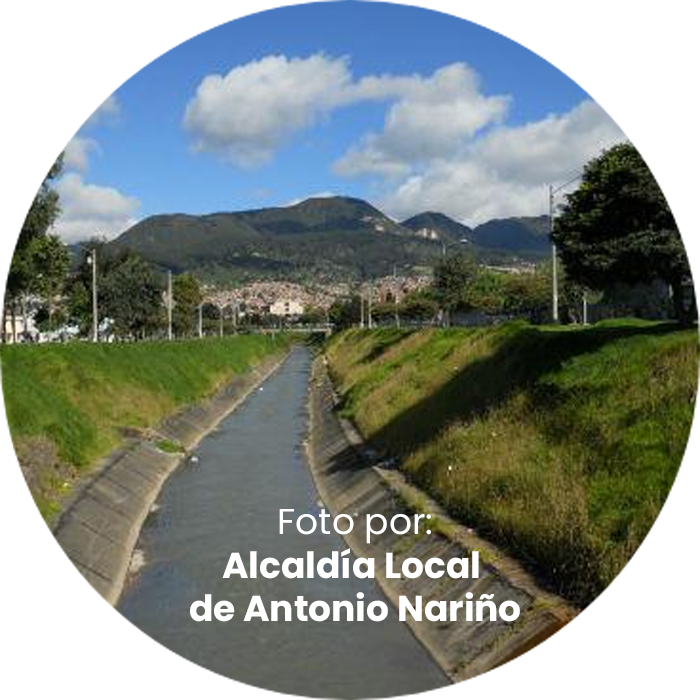
<style>
.page{position:relative;width:700px;height:700px;background:#ffffff}
.page>*{position:absolute;margin:0}
.t1{font:36px "Poppins-Bold";color:#ffffff}
.t2{font:36px "Poppins-Regular";color:#ffffff}
</style>
<div class="page">
<p class="t1" style="left:190px;top:509px;width:330px;height:113px;text-align:center"><span class="t2">Foto por:<br></span>Alcaldía Local <br>de Antonio Nariño</p>
</div>
